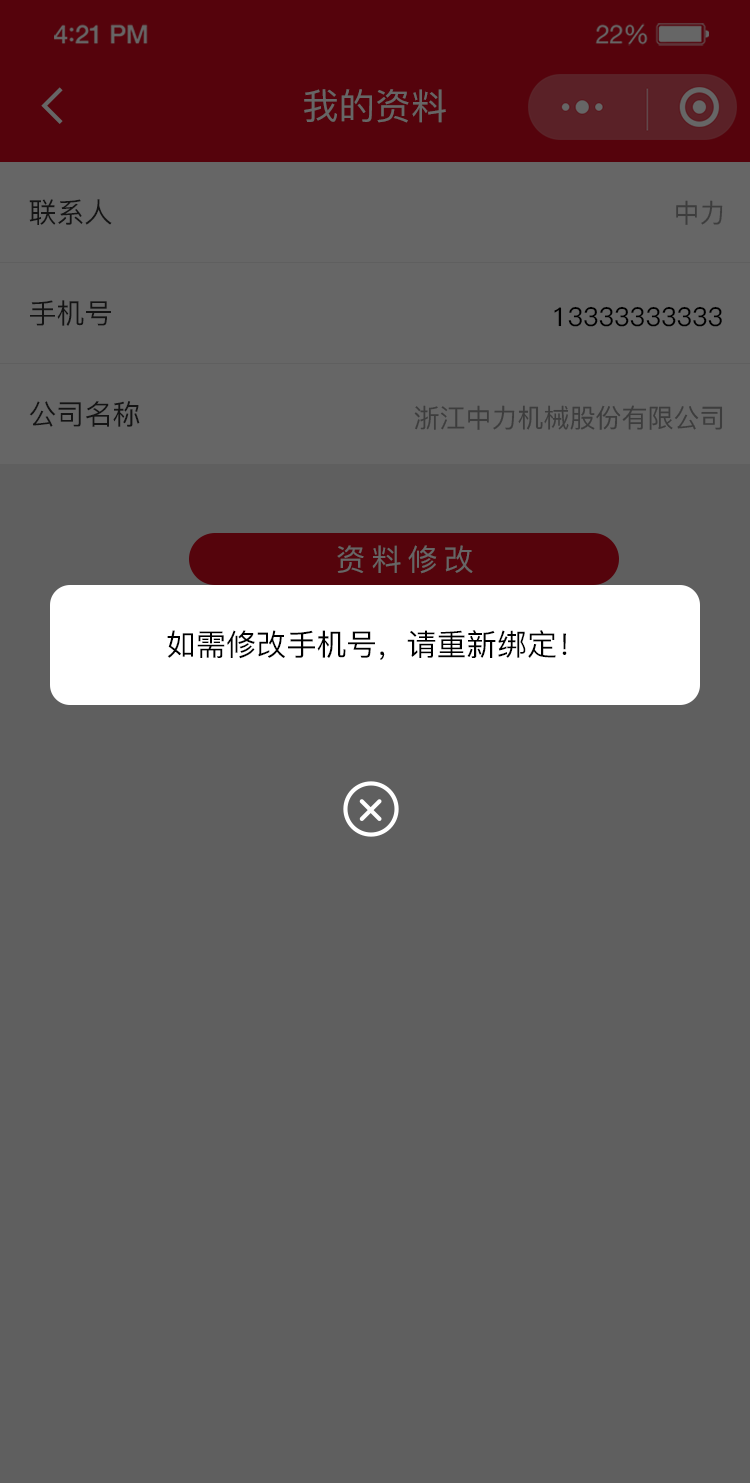
<style>
.page{position:relative;width:750px;height:1483px;background:#5f5f5f}
.page>*{position:absolute;margin:0}
.t1{font:36.1px "PingFang-SC-Medium";color:#666666}
.t2{font:28px "PingFang-SC-Medium";color:#141414}
.t3{font:26px "PingFang-SC-Medium";color:#3d3d3d}
.t4{font:26px "PingFang-SC-Medium";color:#000000}
.t5{font:30px "PingFang-SC-Medium";letter-spacing:0.2em;color:#666666}
.t6{font:30px "PingFang-SC-Medium";color:#000000}
</style>
<div class="page">
<p class="t1" style="left:304px;top:89px;width:142px;height:34px">我的资料</p>
<p class="t2" style="left:29px;top:199px;width:83px;height:26px">联系人</p>
<p class="t3" style="left:676px;top:200px;width:47px;height:25px">中力</p>
<p class="t2" style="left:30px;top:300px;width:81px;height:26px">手机号</p>
<p class="t4" style="left:554px;top:306px;width:168px;height:21px">13333333333</p>
<p class="t2" style="left:29px;top:401px;width:111px;height:26px">公司名称</p>
<p class="t3" style="left:414px;top:405px;width:309px;height:25px">浙江中力机械股份有限公司</p>
<p class="t5" style="left:337px;top:545px;width:136px;height:29px">资料修改</p>
<p class="t6" style="left:167px;top:630px;width:400px;height:30px">如需修改手机号，请重新绑定！</p>
</div>
